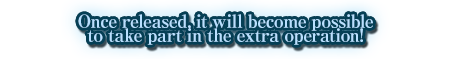
<style>
.page{position:relative;width:452px;height:59px;background:#ffffff}
.page>*{position:absolute;margin:0}
.t1{font:18px/14px "RyuminPro-ExBold";letter-spacing:-0.04em;color:#b9e0ff}
</style>
<div class="page">
<p class="t1" style="left:78px;top:14px;width:295px;height:31px;text-align:center">Once released, it will become possible<br>to take part in the extra operation!</p>
</div>
